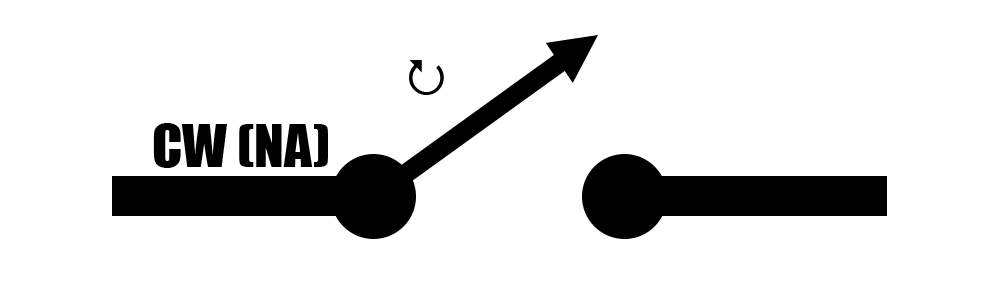
<style>
.page{position:relative;width:1000px;height:300px;background:#ffffff}
.page>*{position:absolute;margin:0}
.t1{font:55px "Impact";color:#000000}
</style>
<div class="page">
<p class="t1" style="left:153px;top:123px;width:175px;height:45px">CW (NA)</p>
</div>
